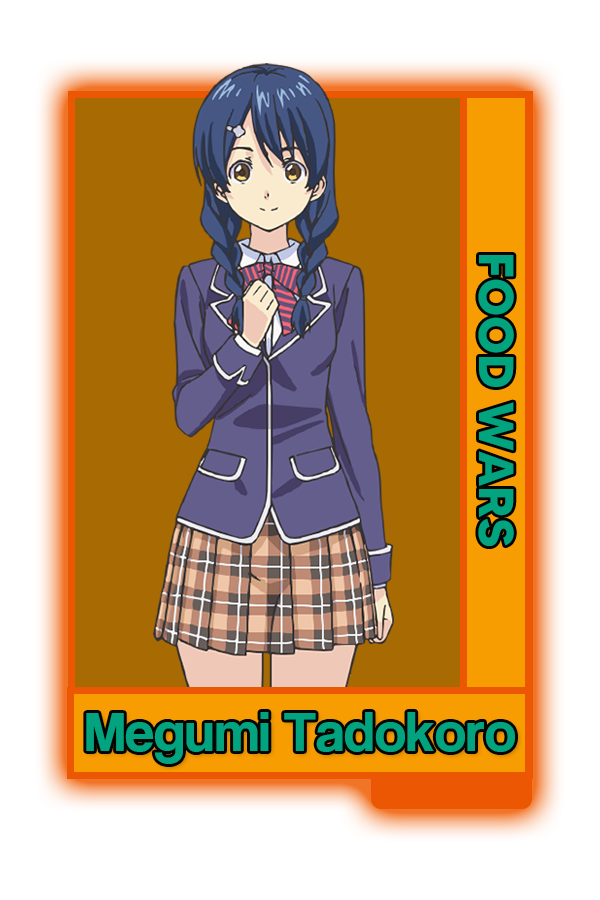
<style>
.page{position:relative;width:600px;height:900px;background:#ffffff}
.page>*{position:absolute;margin:0}
.t1{font:48.8px "MADETOMMY-Bold";color:#009f7b}
.t2{font:58.3px "CoolveticaRg-Regular";color:#009f7b}
</style>
<div class="page">
<p class="t1" style="left:478px;top:255px;width:36px;height:291px;rotate:90deg">FOOD WARS</p>
<p class="t2" style="left:86px;top:712px;width:429px;height:52px">Megumi Tadokoro</p>
</div>
